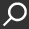
<style>
.page{position:relative;width:29px;height:29px;background:#333333}
.page>*{position:absolute;margin:0}
.t1{font:40px "AppleSymbols";color:#ffffff}
</style>
<div class="page">
<p class="t1" style="left:2px;top:2px;width:25px;height:25px;rotate:45deg">⚲</p>
</div>
